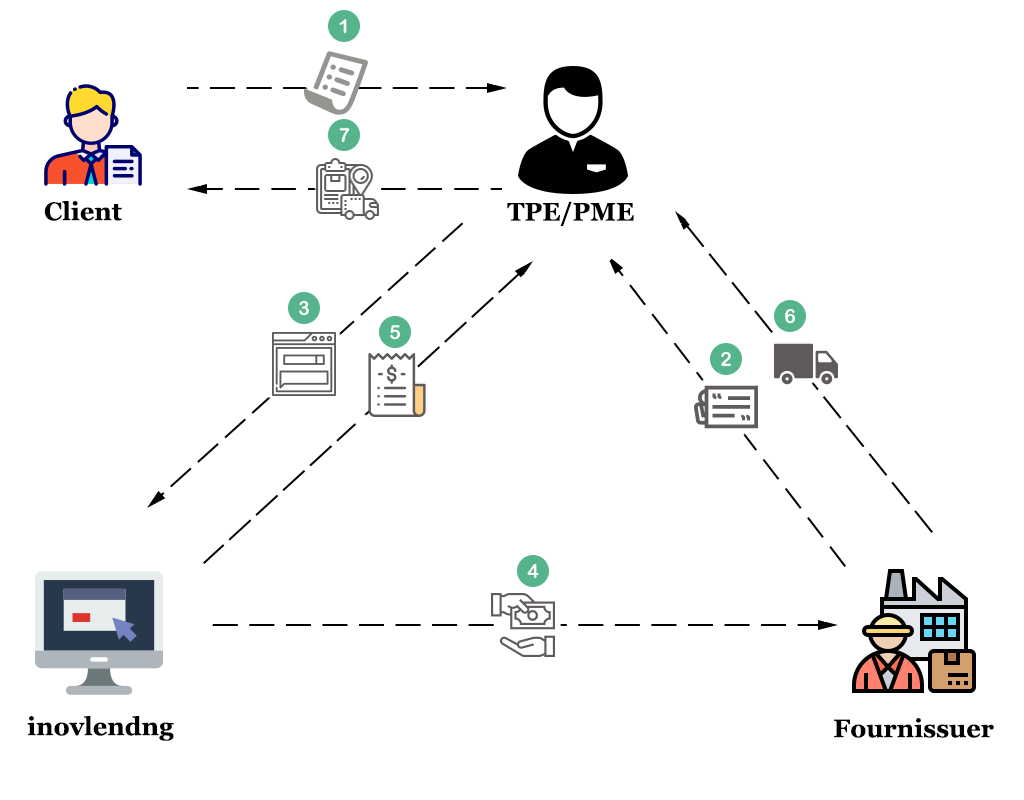
<style>
.page{position:relative;width:1024px;height:800px;background:#ffffff}
.page>*{position:absolute;margin:0}
.t1{font:25.3px "Georgia-Bold";color:#000000}
</style>
<div class="page">
<p class="t1" style="left:44px;top:201px;width:78px;height:20px">Client</p>
<p class="t1" style="left:507px;top:201px;width:127px;height:25px">TPE/PME</p>
<p class="t1" style="left:27px;top:716px;width:147px;height:25px">inovlendng</p>
<p class="t1" style="left:834px;top:718px;width:160px;height:20px">Fournissuer</p>
</div>
